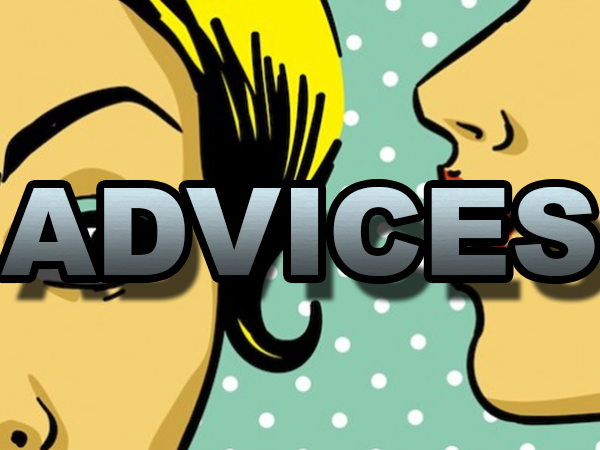
<style>
.page{position:relative;width:600px;height:450px;background:#f4d173}
.page>*{position:absolute;margin:0}
.t1{font:122px "Arial-Black"}
</style>
<div class="page">
<p class="t1" style="left:1px;top:187px;width:594px;height:89px">ADVICES</p>
</div>
